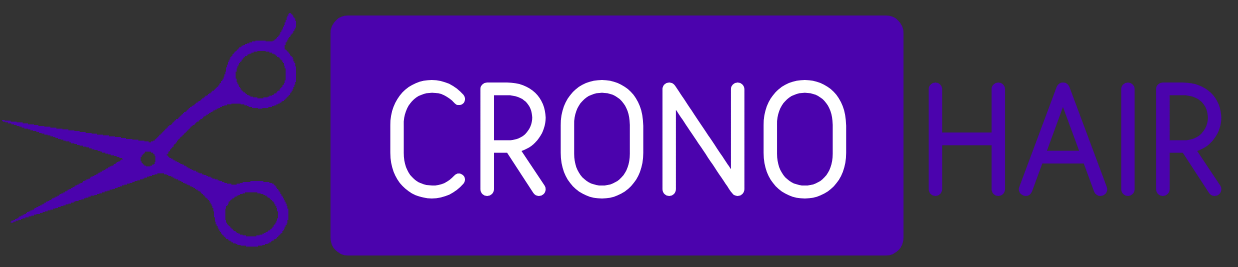
<style>
.page{position:relative;width:1238px;height:267px;background:#333333}
.page>*{position:absolute;margin:0}
.t1{font:160px "SarySoft-Regular";color:#ffffff}
.t2{font:160px "SarySoft-Regular";color:#4b03ad}
</style>
<div class="page">
<p class="t1" style="left:390px;top:80px;width:457px;height:119px">CRONO</p>
<p class="t2" style="left:928px;top:82px;width:294px;height:114px">HAIR</p>
</div>
